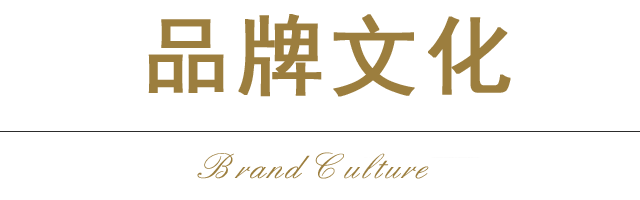
<style>
.page{position:relative;width:640px;height:200px;background:#ffffff}
.page>*{position:absolute;margin:0}
.t1{font:150px "SimHei";letter-spacing:0.05em;color:#9c7e3e;font-weight:bold}
.t2{font:65px "QXyingbixing";letter-spacing:0.05em;color:#9c7e3e}
</style>
<div class="page">
<p class="t1" style="left:148px;top:14px;width:363px;height:83px">品牌文化</p>
<p class="t2" style="left:197px;top:152px;width:232px;height:27px">Brand Culture</p>
</div>
